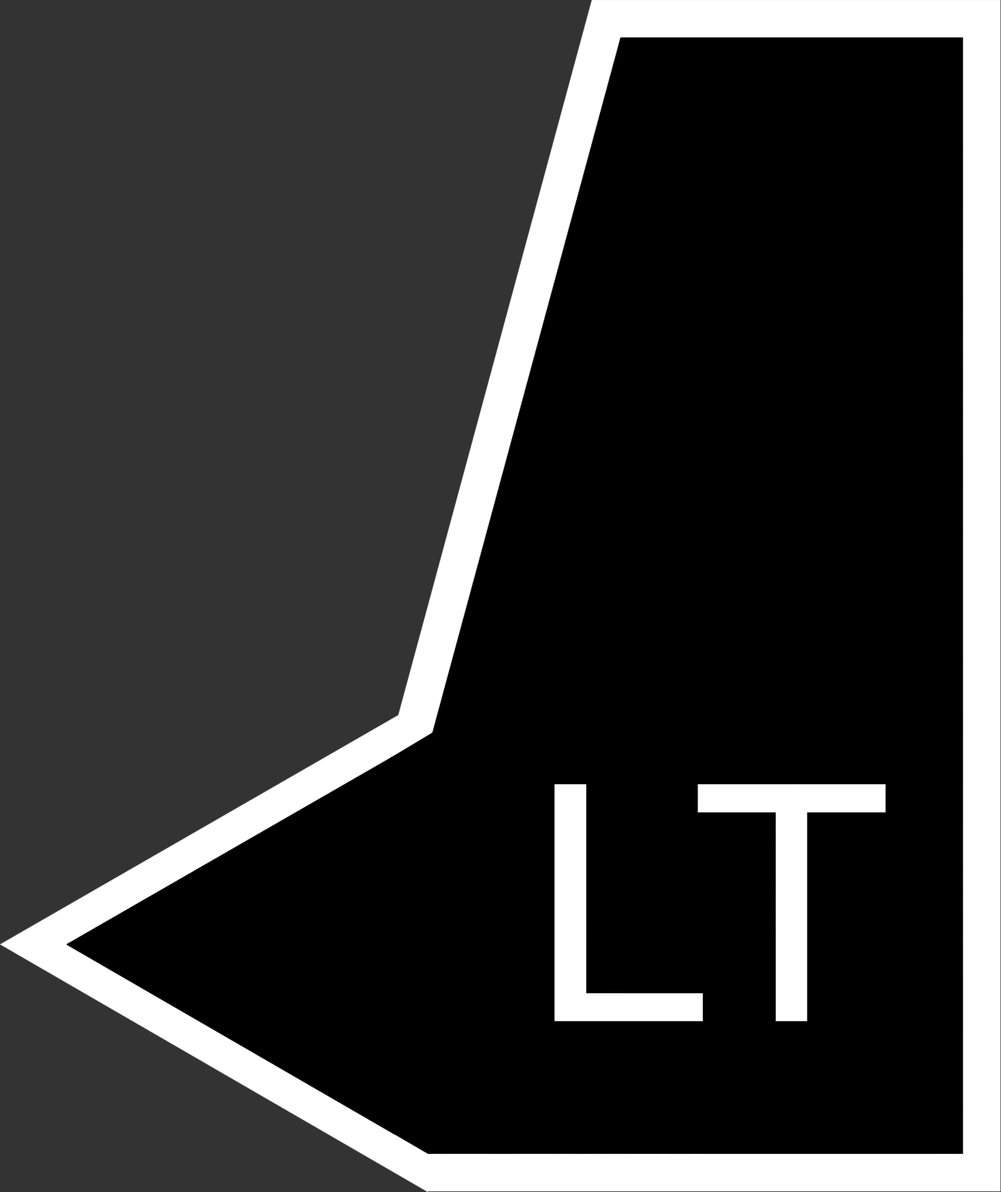
<style>
.page{position:relative;width:1001px;height:1192px;background:#000000}
.page>*{position:absolute;margin:0}
.t1{font:330.8px "ArialMT";color:#ffffff}
</style>
<div class="page">
<p class="t1" style="left:554px;top:784px;width:332px;height:237px">LT</p>
</div>
